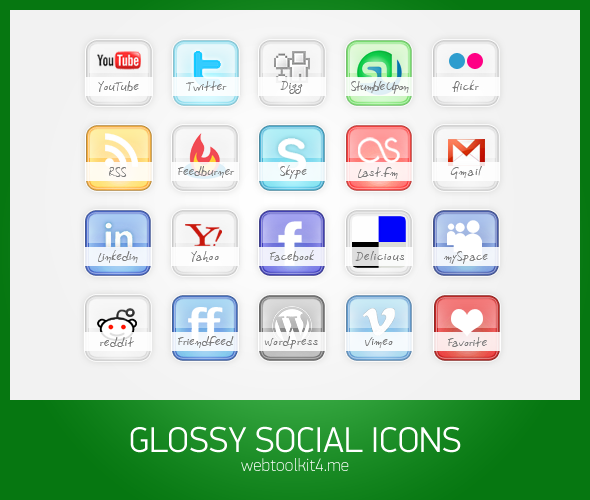
<style>
.page{position:relative;width:590px;height:500px;background:#f2f2f2}
.page>*{position:absolute;margin:0}
.t1{font:12px "PFLiberaPro-Regular";letter-spacing:0.01em;color:#7b7b7b}
.t2{font:12px "PFLiberaPro-Regular";letter-spacing:-0.1em;color:#7b7b7b}
.t3{font:12px "PFLiberaPro-Regular";letter-spacing:0.05em;color:#7b7b7b}
</style>
<div class="page">
<p class="t1" style="left:98px;top:81px;width:41px;height:11px">YouTube</p>
<p class="t1" style="left:186px;top:81px;width:41px;height:10px">Twitter</p>
<p class="t1" style="left:280px;top:81px;width:23px;height:13px">Digg</p>
<p class="t2" style="left:351px;top:81px;width:58px;height:13px">Stumble Upon</p>
<p class="t3" style="left:452px;top:80px;width:27px;height:12px">flickr</p>
<p class="t1" style="left:109px;top:167px;width:18px;height:10px">RSS</p>
<p class="t1" style="left:178px;top:166px;width:57px;height:12px">Feedburner</p>
<p class="t1" style="left:280px;top:165px;width:27px;height:14px">Skype</p>
<p class="t1" style="left:358px;top:167px;width:40px;height:12px">Last.fm</p>
<p class="t3" style="left:450px;top:166px;width:32px;height:13px">Gmail</p>
<p class="t1" style="left:98px;top:250px;width:40px;height:13px">Linkedin</p>
<p class="t3" style="left:191px;top:251px;width:28px;height:11px">Yahoo</p>
<p class="t1" style="left:270px;top:250px;width:44px;height:11px">Facebook</p>
<p class="t3" style="left:355px;top:251px;width:49px;height:10px">Delicious</p>
<p class="t1" style="left:444px;top:251px;width:44px;height:13px">mySpace</p>
</div>
